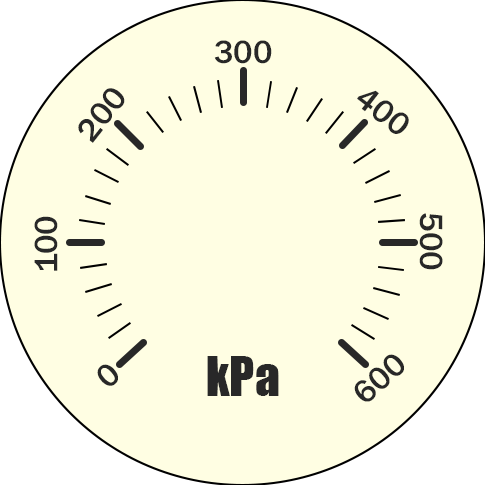
<style>
.page{position:relative;width:485px;height:485px;background:#fffee3}
.page>*{position:absolute;margin:0}
.t1{font:33.3px "FranklinGothic-Medium";color:#282828}
.t2{font:50px "Impact";color:#282828}
</style>
<div class="page">
<p class="t1" style="left:214px;top:40px;width:58px;height:24px">300</p>
<p class="t1" style="left:78px;top:88px;width:47px;height:55px;rotate:-52deg">200</p>
<p class="t1" style="left:357px;top:90px;width:52px;height:44px;rotate:38deg">400</p>
<p class="t1" style="left:34px;top:216px;width:24px;height:55px;rotate:-90deg">100</p>
<p class="t1" style="left:419px;top:213px;width:24px;height:57px;rotate:90deg">500</p>
<p class="t1" style="left:97px;top:364px;width:21px;height:22px;rotate:-42deg">0</p>
<p class="t2" style="left:207px;top:356px;width:72px;height:40px">kPa</p>
<p class="t1" style="left:354px;top:354px;width:50px;height:48px;rotate:-42deg">600</p>
</div>
